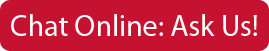
<style>
.page{position:relative;width:269px;height:51px;background:#c41230}
.page>*{position:absolute;margin:0}
.t1{font:30px "MyriadPro-Regular";color:#ffffff}
</style>
<div class="page">
<p class="t1" style="left:11px;top:14px;width:246px;height:22px">Chat Online: Ask Us!</p>
</div>
